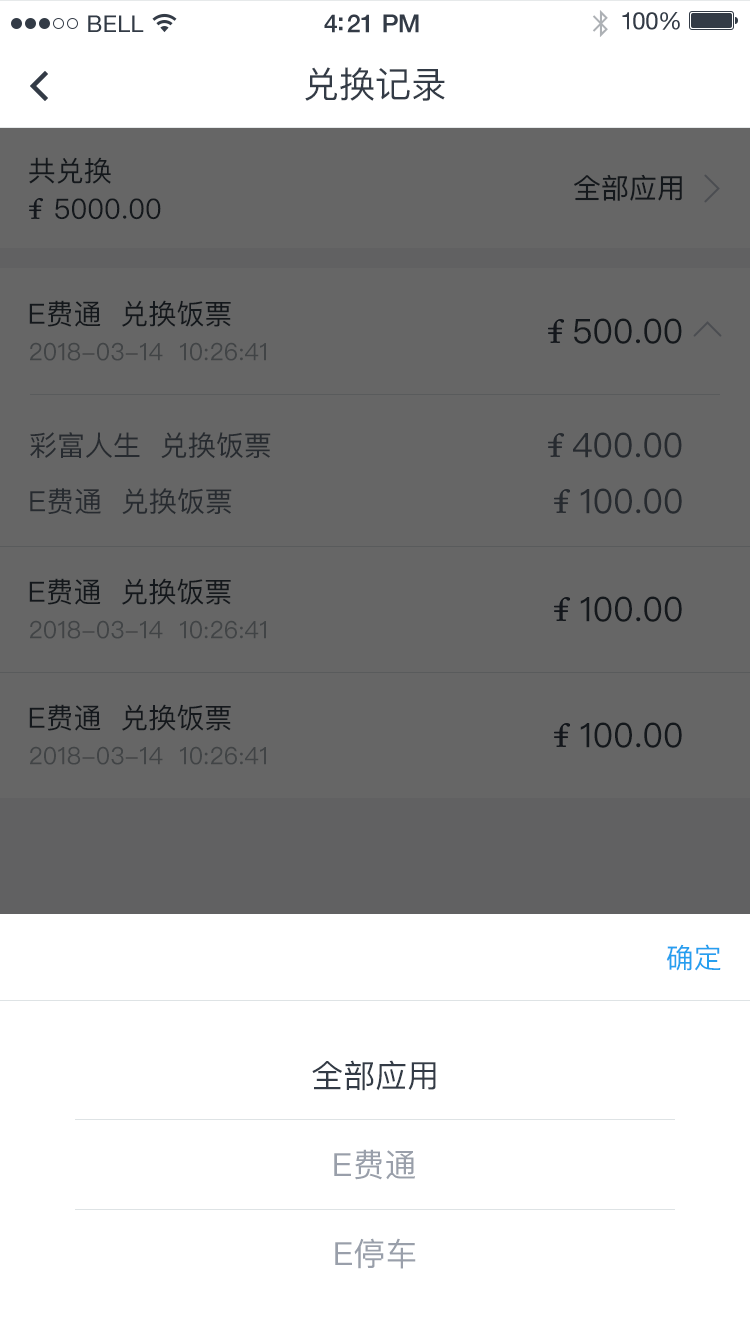
<style>
.page{position:relative;width:750px;height:1334px;background:#666666}
.page>*{position:absolute;margin:0}
.t1{font:23px "HelveticaNeue";letter-spacing:0.02em;color:#333b46}
.t2{font:25px "HelveticaNeue-Medium";letter-spacing:-0.02em;color:#333b46}
.t3{font:24px "HelveticaNeue";letter-spacing:-0.02em;color:#333b46}
.t4{font:36px "PingFangSC-Regular";color:#333b46}
.t5{font:28px "PingFangSC-Regular";color:#14181c}
.t6{font:34px "PingFangSC-Regular";color:#14181c}
.t7{font:24px "PingFangSC-Regular";color:#414446}
.t8{font:28px "PingFangSC-Regular";color:#272b30}
.t9{font:34px "PingFangSC-Regular";color:#272b30}
.t10{font:28px "PingFangSC-Regular";color:#269fef}
.t11{font:32px "PingFangSC-Regular";color:#333b46}
.t12{font:32px "PingFangSC-Regular";color:#999faa}
</style>
<div class="page">
<p class="t1" style="left:88px;top:15px;width:56px;height:17px">BELL</p>
<p class="t2" style="left:324px;top:14px;width:95px;height:19px">4:21 PM</p>
<p class="t3" style="left:622px;top:12px;width:58px;height:18px">100%</p>
<p class="t4" style="left:305px;top:67px;width:140px;height:34px">兑换记录</p>
<p class="t5" style="left:29px;top:157px;width:82px;height:27px">共兑换</p>
<p class="t5" style="left:574px;top:174px;width:108px;height:27px">全部应用</p>
<p class="t5" style="left:55px;top:198px;width:106px;height:22px">5000.00</p>
<p class="t5" style="left:29px;top:300px;width:202px;height:27px">E费通  兑换饭票</p>
<p class="t6" style="left:574px;top:318px;width:108px;height:26px">500.00</p>
<p class="t7" style="left:30px;top:342px;width:236px;height:19px">2018-03-14  10:26:41</p>
<p class="t8" style="left:30px;top:432px;width:241px;height:27px">彩富人生  兑换饭票</p>
<p class="t9" style="left:573px;top:432px;width:109px;height:26px">400.00</p>
<p class="t8" style="left:30px;top:488px;width:202px;height:27px">E费通  兑换饭票</p>
<p class="t9" style="left:580px;top:488px;width:102px;height:26px">100.00</p>
<p class="t5" style="left:29px;top:578px;width:202px;height:27px">E费通  兑换饭票</p>
<p class="t6" style="left:580px;top:596px;width:102px;height:26px">100.00</p>
<p class="t7" style="left:30px;top:620px;width:236px;height:19px">2018-03-14  10:26:41</p>
<p class="t5" style="left:29px;top:704px;width:202px;height:27px">E费通  兑换饭票</p>
<p class="t6" style="left:580px;top:722px;width:102px;height:26px">100.00</p>
<p class="t7" style="left:30px;top:746px;width:236px;height:19px">2018-03-14  10:26:41</p>
<p class="t10" style="left:666px;top:944px;width:55px;height:27px">确定</p>
<p class="t11" style="left:312px;top:1060px;width:124px;height:31px">全部应用</p>
<p class="t12" style="left:334px;top:1149px;width:81px;height:31px">E费通</p>
<p class="t12" style="left:335px;top:1238px;width:81px;height:31px">E停车</p>
</div>
